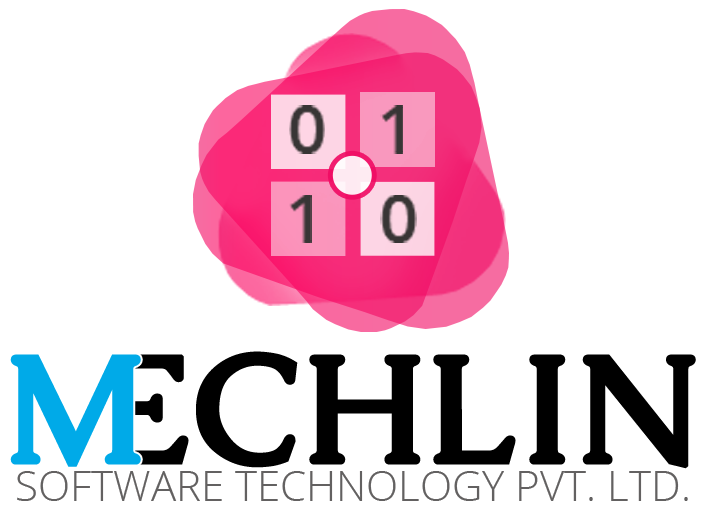
<style>
.page{position:relative;width:705px;height:518px;background:#ffffff}
.page>*{position:absolute;margin:0}
.t1{font:68.7px "OpenSans-SemiBold";color:#383535}
.t2{font:150px "Caudex-Bold";color:#00aae8;font-weight:bold}
.t3{font:42.1px "OpenSans-Light";color:#636161}
</style>
<div class="page">
<p class="t1" style="left:289px;top:105px;width:36px;height:49px">0</p>
<p class="t1" style="left:380px;top:105px;width:23px;height:49px">1</p>
<p class="t1" style="left:289px;top:195px;width:23px;height:48px">1</p>
<p class="t1" style="left:380px;top:195px;width:37px;height:48px">0</p>
<p class="t2" style="left:10px;top:354px;width:131px;height:113px">M</p>
<p class="t3" style="left:17px;top:471px;width:671px;height:30px">SOFTWARE TECHNOLOGY PVT. LTD.</p>
</div>
